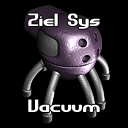
<style>
.page{position:relative;width:128px;height:128px;background:#000000}
.page>*{position:absolute;margin:0}
.t1{font:18px "GravitateBRK";color:#ffffff}
</style>
<div class="page">
<p class="t1" style="left:28px;top:13px;width:72px;height:16px">Ziel Sys</p>
<p class="t1" style="left:28px;top:99px;width:72px;height:13px">Vacuum</p>
</div>
